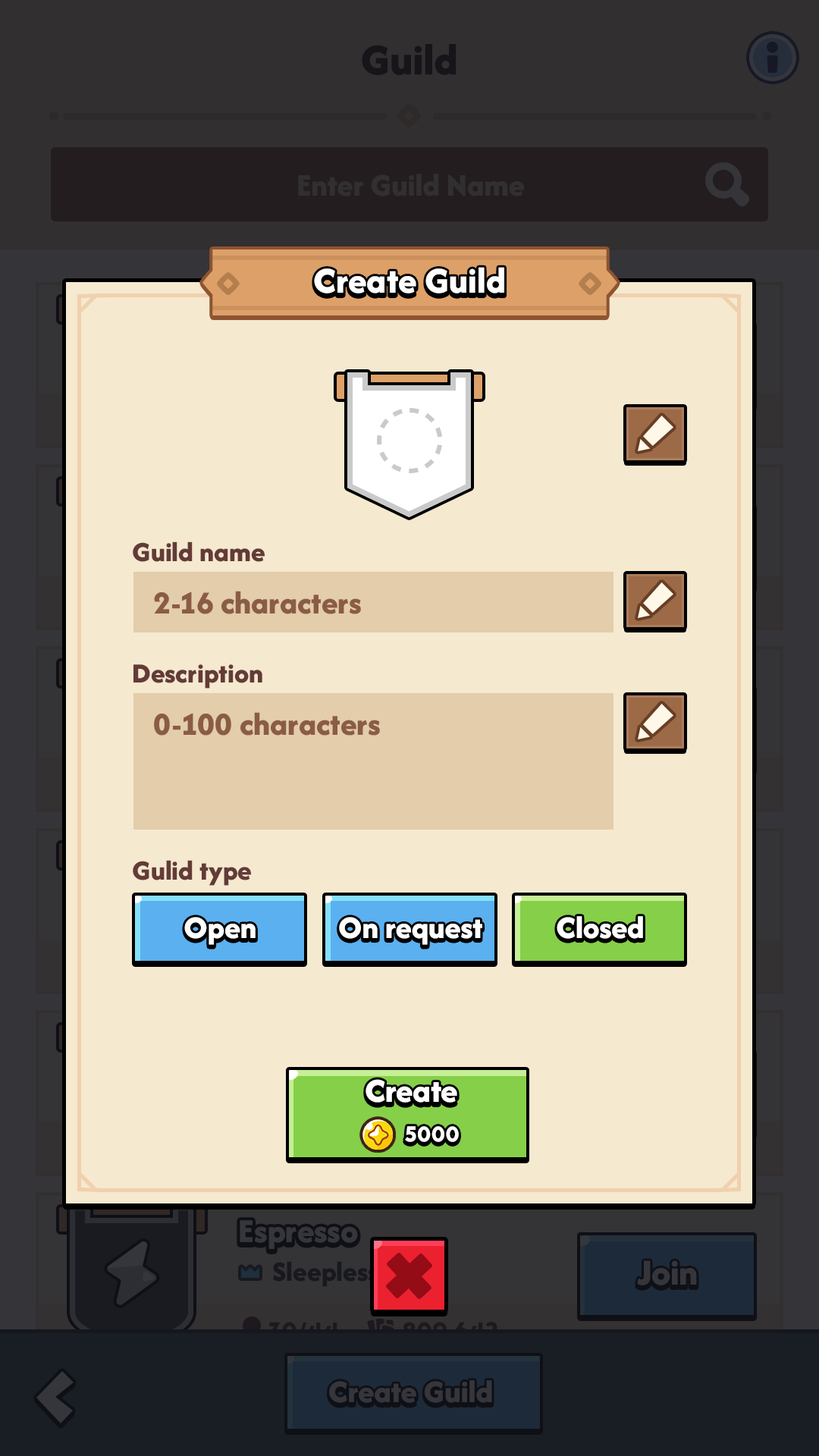
<style>
.page{position:relative;width:819px;height:1456px;background:#f5e9d0}
.page>*{position:absolute;margin:0}
.t1{font:37.9px "AfacadFlux-ExtraBold";color:#ffffff}
.t2{font:28.8px "AfacadFlux-ExtraBold";color:#633b37}
.t3{font:33.4px "AfacadFlux-ExtraBold";color:#8b5c45}
.t4{font:32.8px "AfacadFlux-ExtraBold";color:#ffffff}
.t5{font:34.9px "AfacadFlux-ExtraBold";color:#ffffff}
.t6{font:22.7px "LTAvocado-Bold";color:#ffffff}
</style>
<div class="page">
<p class="t1" style="left:314px;top:267px;width:190px;height:26px">Create Guild</p>
<p class="t2" style="left:133px;top:541px;width:132px;height:21px">Guild name</p>
<p class="t3" style="left:154px;top:591px;width:207px;height:23px">2-16 characters</p>
<p class="t2" style="left:133px;top:664px;width:129px;height:25px">Description</p>
<p class="t3" style="left:154px;top:712px;width:226px;height:24px">0-100 characters</p>
<p class="t2" style="left:133px;top:860px;width:118px;height:26px">Gulid type</p>
<p class="t4" style="left:184px;top:917px;width:72px;height:28px">Open</p>
<p class="t4" style="left:339px;top:917px;width:143px;height:28px">On request</p>
<p class="t4" style="left:557px;top:916px;width:86px;height:23px">Closed</p>
<p class="t5" style="left:366px;top:1079px;width:91px;height:24px">Create</p>
<p class="t6" style="left:405px;top:1126px;width:54px;height:16px">5000</p>
</div>
